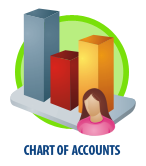
<style>
.page{position:relative;width:146px;height:166px;background:#ffffff}
.page>*{position:absolute;margin:0}
.t1{font:14px "MyriadPro-BoldCond";color:#0e4481}
</style>
<div class="page">
<p class="t1" style="left:24px;top:145px;width:97px;height:10px">CHART OF ACCOUNTS</p>
</div>
